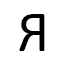
<style>
.page{position:relative;width:64px;height:64px;background:#ffffff}
.page>*{position:absolute;margin:0}
.t1{font:58.3px "Calibri";color:#000000}
</style>
<div class="page">
<p class="t1" style="left:19px;top:14px;width:26px;height:37px">Я</p>
</div>
